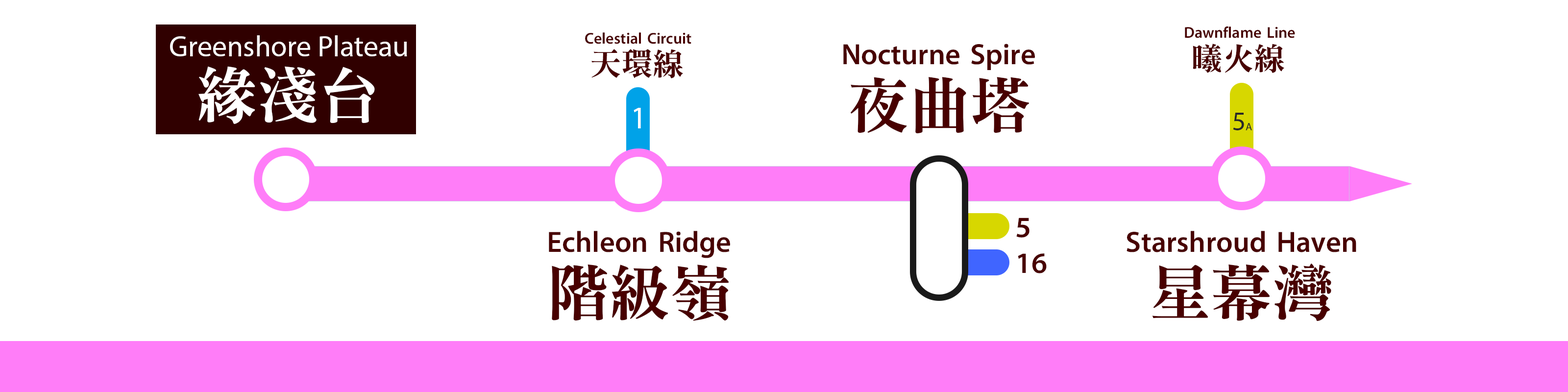
<style>
.page{position:relative;width:1568px;height:392px;background:#ffffff}
.page>*{position:absolute;margin:0}
.t1{font:15.7px "MTR-Sung";color:#480000}
.t2{font:29.4px "MyriadPro-Regular";color:#ffffff}
.t3{font:31.4px "MTR-Sung";color:#480000}
.t4{font:29.4px "MTR-Sung";color:#480000}
.t5{font:61.2px "MTR-Sung";color:#ffffff}
.t6{font:61.2px "MTR-Sung";color:#480000}
.t7{font:31.4px "MyriadPro-Regular";color:#ffffff}
.t8{font:27px "MyriadPro-Regular";color:#282828}
.t9{font:10.8px "MyriadPro-Regular";color:#282828}
.t10{font:29.6px "MTR-Sung";color:#480000}
</style>
<div class="page">
<p class="t1" style="left:1185px;top:26px;width:110px;height:12px">Dawnflame Line</p>
<p class="t2" style="left:170px;top:35px;width:237px;height:21px">Greenshore Plateau</p>
<p class="t1" style="left:585px;top:32px;width:106px;height:12px">Celestial Circuit</p>
<p class="t3" style="left:591px;top:49px;width:92px;height:29px">天環線</p>
<p class="t4" style="left:843px;top:44px;width:192px;height:26px">Nocturne Spire</p>
<p class="t3" style="left:1193px;top:44px;width:91px;height:29px">曦火線</p>
<p class="t5" style="left:198px;top:66px;width:177px;height:58px">緣淺台</p>
<p class="t6" style="left:850px;top:77px;width:179px;height:57px">夜曲塔</p>
<p class="t7" style="left:634px;top:108px;width:7px;height:20px">1</p>
<p class="t8" style="left:1233px;top:113px;width:19px;height:17px">5<span class="t9">A</span></p>
<p class="t10" style="left:1016px;top:218px;width:31px;height:55px">5<br>16</p>
<p class="t4" style="left:549px;top:231px;width:181px;height:27px">Echleon Ridge</p>
<p class="t4" style="left:1127px;top:231px;width:229px;height:21px">Starshroud Haven</p>
<p class="t6" style="left:552px;top:264px;width:177px;height:57px">階級嶺</p>
<p class="t6" style="left:1152px;top:263px;width:179px;height:58px">星幕灣</p>
</div>
